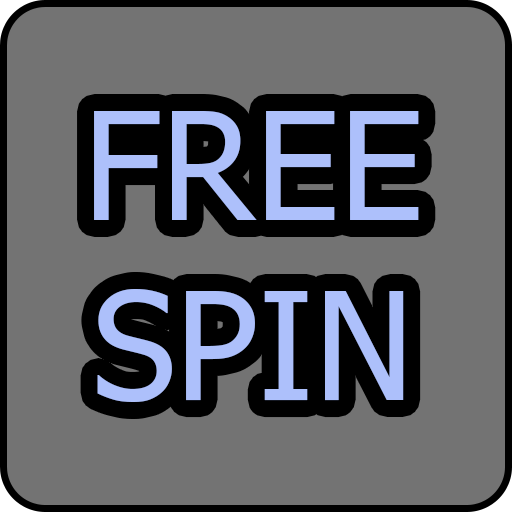
<style>
.page{position:relative;width:512px;height:512px;background:#737373}
.page>*{position:absolute;margin:0}
.t1{font:150px "Tahoma";color:#adc0fb}
</style>
<div class="page">
<p class="t1" style="left:94px;top:111px;width:325px;height:291px;text-align:center">FREE<br>SPIN</p>
</div>
